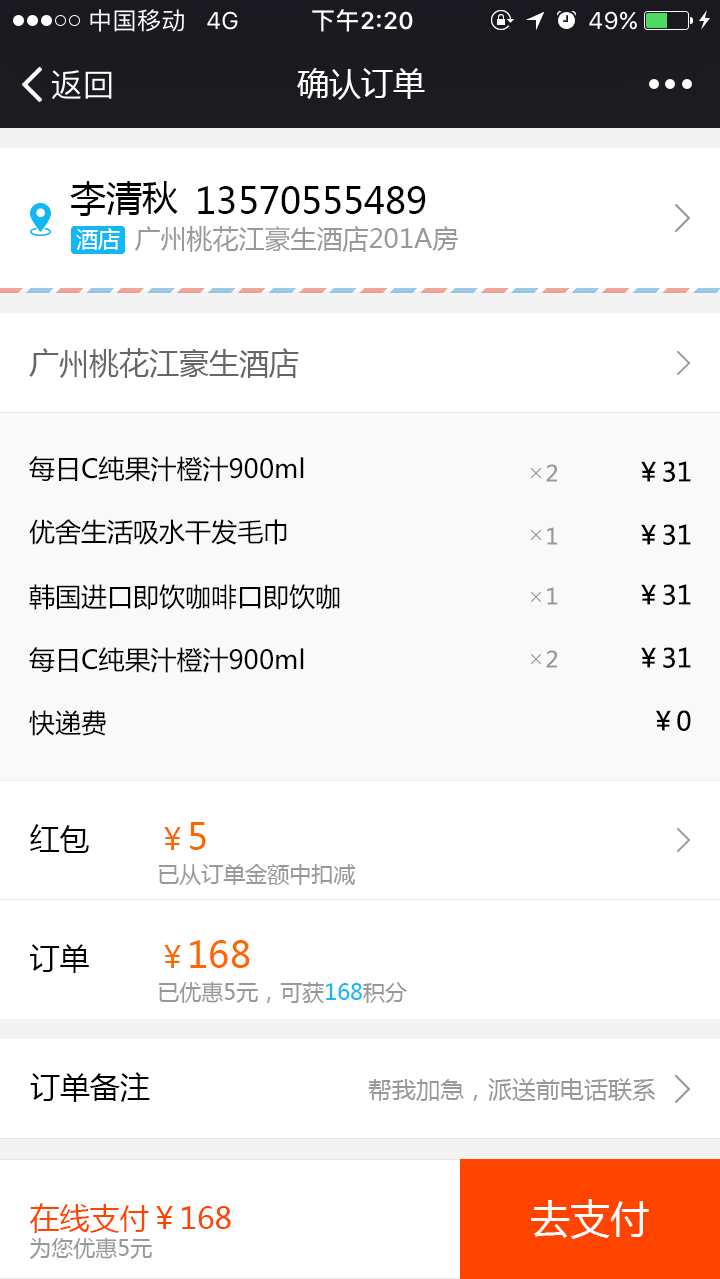
<style>
.page{position:relative;width:720px;height:1279px;background:#ffffff}
.page>*{position:absolute;margin:0}
.t1{font:32px "MicrosoftYaHei";color:#ffffff}
.t2{font:36px "MicrosoftYaHei";color:#000000}
.t3{font:22px "MicrosoftYaHei";color:#ffffff}
.t4{font:26px "MicrosoftYaHei";color:#999999}
.t5{font:30px "MicrosoftYaHei";color:#666666}
.t6{font:26px "MicrosoftYaHei";color:#000000}
.t7{font:22px "MicrosoftYaHei";color:#999999}
.t8{font:22px/44px "MicrosoftYaHei";color:#999999}
.t9{font:30px/44px "MicrosoftYaHei";color:#ff6600}
.t10{font:36px/44px "MicrosoftYaHei";color:#ff6600}
.t11{font:30px "MicrosoftYaHei";color:#000000}
.t12{font:22px/44px "MicrosoftYaHei";color:#12b7f5}
.t13{font:24px "MicrosoftYaHei";color:#999999}
.t14{font:30px/34px "MicrosoftYaHei";color:#ff4400}
.t15{font:22px/34px "MicrosoftYaHei";color:#999999}
.t16{font:40px "MicrosoftYaHei";color:#ffffff}
</style>
<div class="page">
<p class="t1" style="left:297px;top:68px;width:128px;height:32px">确认订单</p>
<p class="t2" style="left:70px;top:181px;width:108px;height:35px">李清秋</p>
<p class="t2" style="left:198px;top:186px;width:228px;height:28px">13570555489</p>
<p class="t3" style="left:76px;top:228px;width:44px;height:22px">酒店</p>
<p class="t4" style="left:134px;top:226px;width:324px;height:26px">广州桃花江豪生酒店201A房</p>
<p class="t5" style="left:29px;top:348px;width:270px;height:30px">广州桃花江豪生酒店</p>
<p class="t6" style="left:29px;top:456px;width:275px;height:26px">每日C纯果汁橙汁900ml</p>
<p class="t6" style="left:641px;top:461px;width:50px;height:21px">￥31</p>
<p class="t7" style="left:546px;top:464px;width:11px;height:18px">2</p>
<p class="t6" style="left:29px;top:519px;width:258px;height:26px">优舍生活吸水干发毛巾</p>
<p class="t7" style="left:547px;top:527px;width:11px;height:18px">1</p>
<p class="t6" style="left:641px;top:524px;width:50px;height:21px">￥31</p>
<p class="t6" style="left:29px;top:584px;width:311px;height:26px">韩国进口即饮咖啡口即饮咖</p>
<p class="t7" style="left:547px;top:587px;width:11px;height:18px">1</p>
<p class="t6" style="left:641px;top:584px;width:50px;height:21px">￥31</p>
<p class="t6" style="left:29px;top:647px;width:275px;height:26px">每日C纯果汁橙汁900ml</p>
<p class="t7" style="left:546px;top:650px;width:11px;height:18px">2</p>
<p class="t6" style="left:641px;top:647px;width:50px;height:21px">￥31</p>
<p class="t6" style="left:29px;top:710px;width:77px;height:26px">快递费</p>
<p class="t6" style="left:656px;top:710px;width:35px;height:21px">￥0</p>
<p class="t8" style="left:158px;top:822px;width:198px;height:63px"><span class="t9">￥</span><span class="t10">5<br></span>已从订单金额中扣减</p>
<p class="t11" style="left:30px;top:824px;width:59px;height:29px">红包</p>
<p class="t8" style="left:158px;top:940px;width:249px;height:63px"><span class="t9">￥</span><span class="t10">168<br></span>已优惠5元，可获<span class="t12">168</span>积分</p>
<p class="t11" style="left:30px;top:944px;width:59px;height:29px">订单</p>
<p class="t11" style="left:30px;top:1072px;width:120px;height:30px">订单备注</p>
<p class="t13" style="left:368px;top:1078px;width:288px;height:23px">帮我加急，派送前电话联系</p>
<p class="t14" style="left:29px;top:1203px;width:202px;height:56px">在线支付￥168<br><span class="t15">为您优惠5元</span></p>
<p class="t16" style="left:531px;top:1199px;width:118px;height:40px">去支付</p>
</div>
